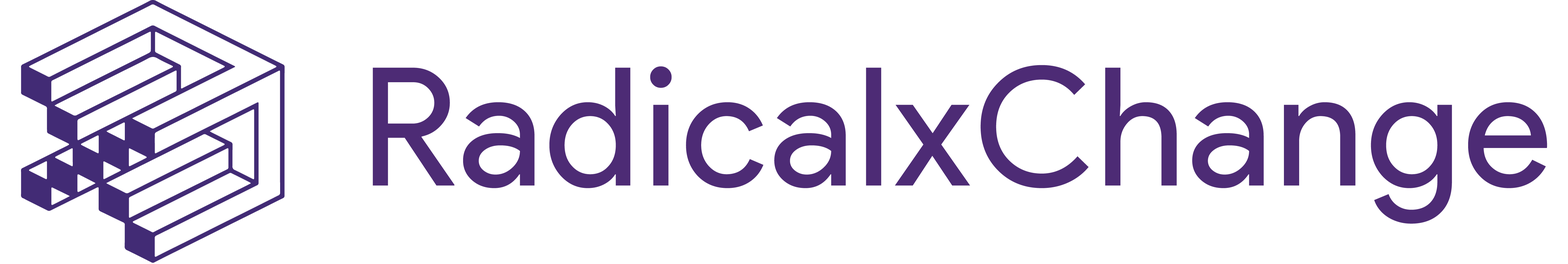
<style>
.page{position:relative;width:1568px;height:264px;background:#ffffff}
.page>*{position:absolute;margin:0}
.t1{font:164.4px "ProductSans-Regular";letter-spacing:0.02em;color:#4d2b75}
</style>
<div class="page">
<p class="t1" style="left:373px;top:65px;width:1174px;height:159px">RadicalxChange</p>
</div>
